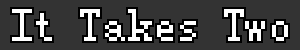
<style>
.page{position:relative;width:300px;height:50px;background:#333333}
.page>*{position:absolute;margin:0}
.t1{font:48px "FZXS12--GB1-0";color:#ffffff}
</style>
<div class="page">
<p class="t1" style="left:12px;top:9px;width:276px;height:32px">It Takes Two</p>
</div>
